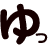
<style>
.page{position:relative;width:48px;height:48px;background:#ffffff}
.page>*{position:absolute;margin:0}
.t1{font:47.8px "DFMaruGothicG-SB-WIN-RKSJ-H";letter-spacing:-0.1em;color:#160000;scale:0.96 1}
.t2{font:16.8px "DFMaruGothicG-SB-WIN-RKSJ-H";letter-spacing:-0.1em;color:#160000;scale:0.96 1}
</style>
<div class="page">
<p class="t1" style="left:0px;top:3px;width:40px;height:42px;rotate:-7deg">ゆ</p>
<p class="t2" style="left:35px;top:33px;width:13px;height:10px;rotate:7deg">っ</p>
</div>
